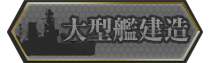
<style>
.page{position:relative;width:210px;height:63px}
.page>*{position:absolute;margin:0}
.t1{font:26px "RyuminPro-ExBold";letter-spacing:-0.025em;color:#8c8c8c}
</style>
<div class="page">
<p class="t1" style="left:62px;top:17px;width:127px;height:25px">大型艦建造</p>
</div>
